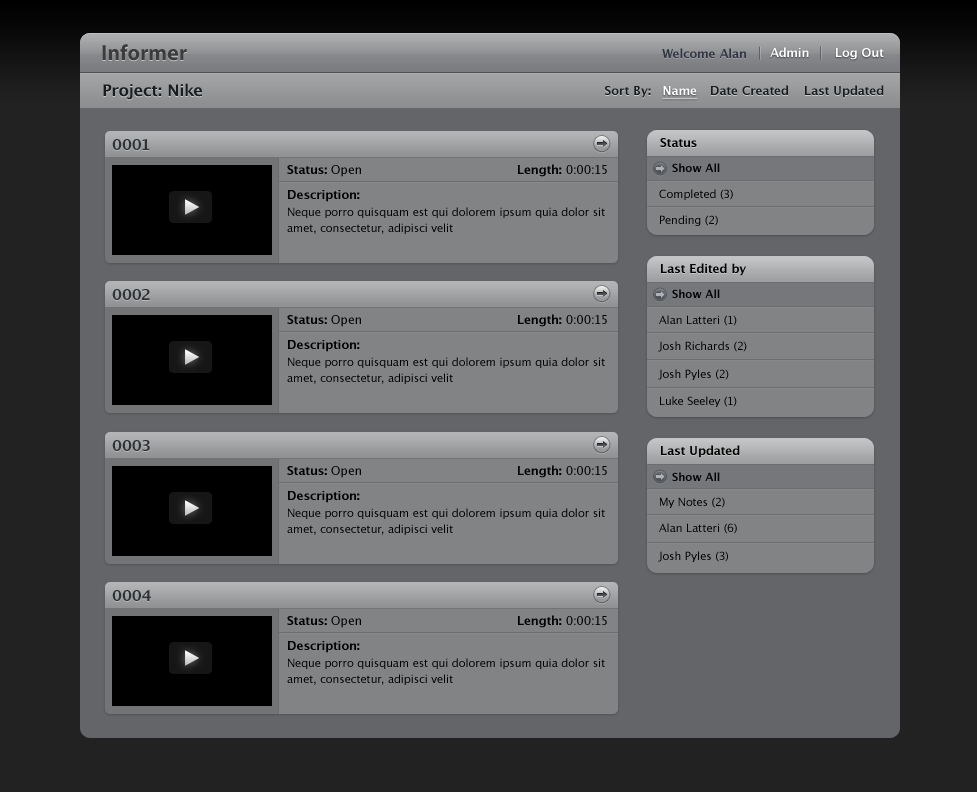
<style>
.page{position:relative;width:977px;height:792px;background:#818385}
.page>*{position:absolute;margin:0}
.t1{font:22px "MyriadPro-Bold";color:#3c3c3c}
.t2{font:12px "LucidaGrande-Bold";color:#303643}
.t3{font:12px "LucidaGrande-Bold";color:#ffffff}
.t4{font:16px "LucidaGrande-Bold";color:#191d20}
.t5{font:12px "LucidaGrande-Bold";color:#191d20}
.t6{font:12px "LucidaGrande-Bold";color:#ffffff;text-decoration:underline}
.t7{font:15px "LucidaGrande-Bold";color:#2f3337}
.t8{font:12px "LucidaGrande-Bold";color:#000000}
.t9{font:12px "LucidaGrande";color:#000000}
.t10{font:11px "LucidaGrande-Bold";color:#020202}
.t11{font:11px "LucidaGrande";color:#000000}
.t12{font:11px/15.6px "LucidaGrande";color:#000000}
</style>
<div class="page">
<p class="t1" style="left:102px;top:44px;width:85px;height:17px">Informer</p>
<p class="t2" style="left:662px;top:48px;width:84px;height:10px">Welcome Alan</p>
<p class="t3" style="left:770px;top:47px;width:39px;height:10px">Admin</p>
<p class="t3" style="left:836px;top:48px;width:48px;height:12px">Log Out</p>
<p class="t4" style="left:103px;top:83px;width:99px;height:17px">Project: Nike</p>
<p class="t5" style="left:605px;top:86px;width:46px;height:12px">Sort By:</p>
<p class="t6" style="left:662px;top:86px;width:36px;height:13px">Name</p>
<p class="t5" style="left:711px;top:85px;width:77px;height:10px">Date Created</p>
<p class="t5" style="left:805px;top:85px;width:79px;height:13px">Last Updated</p>
<p class="t7" style="left:112px;top:139px;width:38px;height:11px">0001</p>
<p class="t8" style="left:660px;top:138px;width:37px;height:9px">Status</p>
<p class="t8" style="left:287px;top:165px;width:74px;height:12px">Status: <span class="t9">Open</span></p>
<p class="t8" style="left:518px;top:164px;width:89px;height:13px">Length: <span class="t9">0:00:15</span></p>
<p class="t10" style="left:672px;top:163px;width:48px;height:9px">Show All</p>
<p class="t8" style="left:288px;top:190px;width:72px;height:12px">Description:</p>
<p class="t11" style="left:659px;top:189px;width:74px;height:11px">Completed (3)</p>
<p class="t12" style="left:287px;top:207px;width:318px;height:27px">Neque porro quisquam est qui dolorem ipsum quia dolor sit<br>amet, consectetur, adipisci velit</p>
<p class="t11" style="left:660px;top:215px;width:58px;height:11px">Pending (2)</p>
<p class="t8" style="left:661px;top:263px;width:85px;height:13px">Last Edited by</p>
<p class="t7" style="left:112px;top:289px;width:38px;height:11px">0002</p>
<p class="t10" style="left:672px;top:289px;width:48px;height:9px">Show All</p>
<p class="t8" style="left:287px;top:315px;width:74px;height:12px">Status: <span class="t9">Open</span></p>
<p class="t8" style="left:518px;top:314px;width:89px;height:13px">Length: <span class="t9">0:00:15</span></p>
<p class="t11" style="left:659px;top:315px;width:78px;height:11px">Alan Latteri (1)</p>
<p class="t8" style="left:288px;top:340px;width:72px;height:12px">Description:</p>
<p class="t11" style="left:658px;top:341px;width:89px;height:11px">Josh Richards (2)</p>
<p class="t12" style="left:287px;top:357px;width:318px;height:27px">Neque porro quisquam est qui dolorem ipsum quia dolor sit<br>amet, consectetur, adipisci velit</p>
<p class="t11" style="left:658px;top:369px;width:71px;height:11px">Josh Pyles (2)</p>
<p class="t11" style="left:660px;top:396px;width:77px;height:11px">Luke Seeley (1)</p>
<p class="t7" style="left:112px;top:440px;width:38px;height:11px">0003</p>
<p class="t8" style="left:661px;top:445px;width:79px;height:13px">Last Updated</p>
<p class="t8" style="left:287px;top:466px;width:74px;height:12px">Status: <span class="t9">Open</span></p>
<p class="t8" style="left:518px;top:465px;width:89px;height:13px">Length: <span class="t9">0:00:15</span></p>
<p class="t10" style="left:672px;top:472px;width:48px;height:9px">Show All</p>
<p class="t8" style="left:288px;top:491px;width:72px;height:12px">Description:</p>
<p class="t11" style="left:660px;top:497px;width:65px;height:11px">My Notes (2)</p>
<p class="t12" style="left:287px;top:508px;width:318px;height:27px">Neque porro quisquam est qui dolorem ipsum quia dolor sit<br>amet, consectetur, adipisci velit</p>
<p class="t11" style="left:659px;top:523px;width:78px;height:11px">Alan Latteri (6)</p>
<p class="t11" style="left:658px;top:551px;width:70px;height:11px">Josh Pyles (3)</p>
<p class="t7" style="left:112px;top:590px;width:39px;height:11px">0004</p>
<p class="t8" style="left:287px;top:616px;width:74px;height:12px">Status: <span class="t9">Open</span></p>
<p class="t8" style="left:518px;top:615px;width:89px;height:13px">Length: <span class="t9">0:00:15</span></p>
<p class="t8" style="left:288px;top:641px;width:72px;height:12px">Description:</p>
<p class="t12" style="left:287px;top:658px;width:318px;height:27px">Neque porro quisquam est qui dolorem ipsum quia dolor sit<br>amet, consectetur, adipisci velit</p>
</div>
